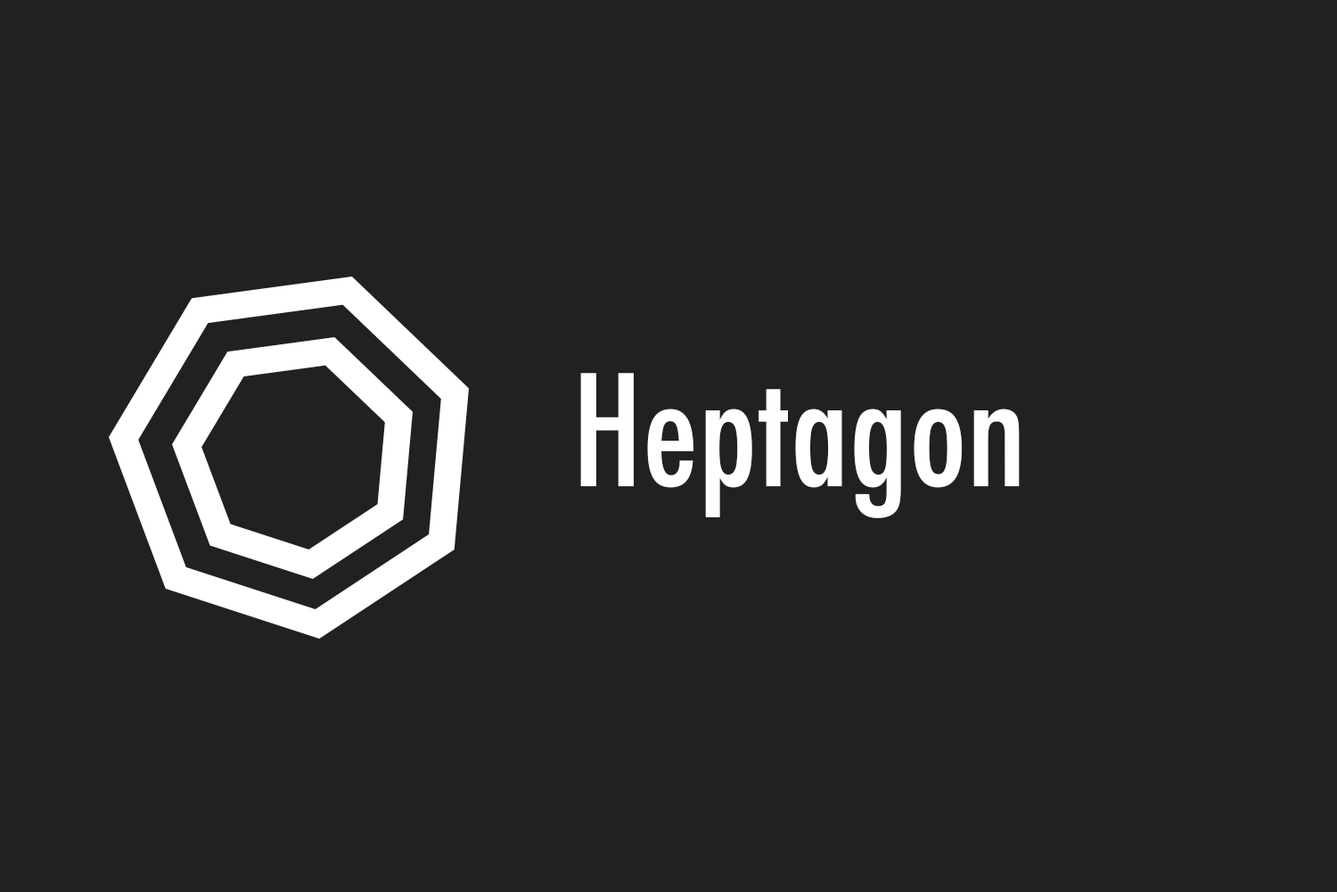
<style>
.page{position:relative;width:1337px;height:892px;background:#212121}
.page>*{position:absolute;margin:0}
.t1{font:149.8px "Futura-CondensedMedium";color:#ffffff}
</style>
<div class="page">
<p class="t1" style="left:580px;top:373px;width:440px;height:145px">Heptagon</p>
</div>
